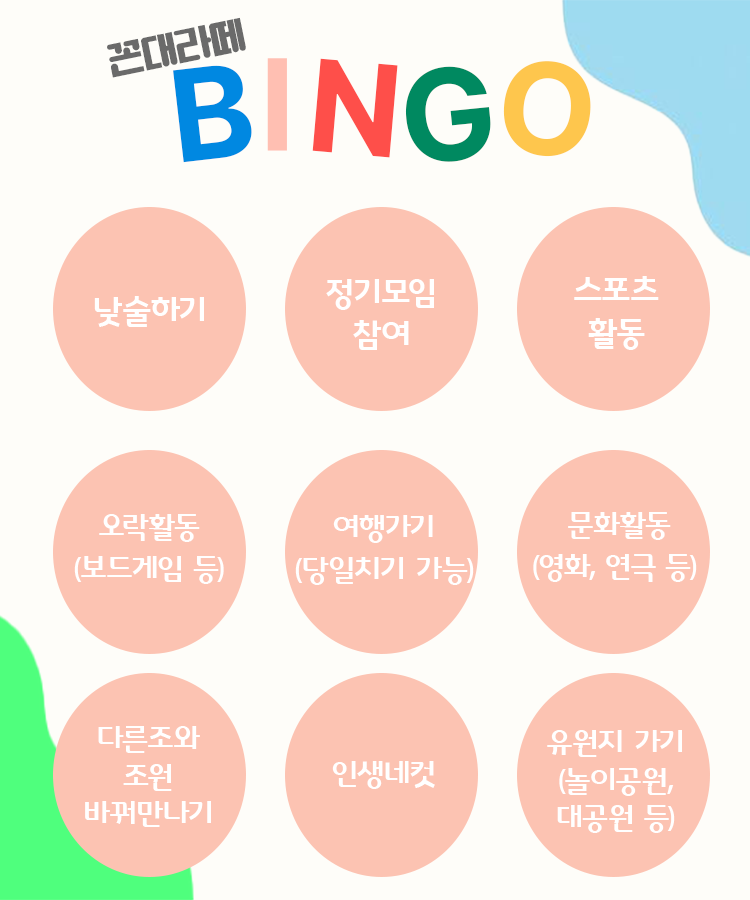
<style>
.page{position:relative;width:750px;height:900px;background:#fefdf9}
.page>*{position:absolute;margin:0}
.t1{font:32.9px "HSDuggobi";letter-spacing:-0.025em;color:#6a6a6a}
.t2{font:130.5px "Pretendard-Bold";letter-spacing:-0.025em;color:#0088e1}
.t3{font:130.5px "Pretendard-Bold";letter-spacing:-0.025em;color:#ffbfb2}
.t4{font:130.5px "Pretendard-Bold";letter-spacing:-0.025em;color:#fe4f4a}
.t5{font:130.5px "Pretendard-Bold";letter-spacing:-0.025em;color:#fec64d}
.t6{font:130.5px "Pretendard-Bold";letter-spacing:-0.025em;color:#008960}
.t7{font:33.3px/41.7px "1973MimiWorldB";letter-spacing:-0.025em;color:#ffffff}
.t8{font:33.3px "1973MimiWorldB";letter-spacing:-0.025em;color:#ffffff}
.t9{font:30.1px/41.7px "1973MimiWorldB";letter-spacing:-0.025em;color:#ffffff}
.t10{font:30.1px/37.5px "1973MimiWorldB";letter-spacing:-0.025em;color:#ffffff}
.t11{font:30.1px "1973MimiWorldB";letter-spacing:-0.025em;color:#ffffff}
</style>
<div class="page">
<p class="t1" style="left:107px;top:17px;width:139px;height:61px;rotate:-12deg">꼰대라떼</p>
<p class="t2" style="left:173px;top:65px;width:79px;height:98px;rotate:-7deg">B</p>
<p class="t3" style="left:267px;top:58px;width:20px;height:93px">I</p>
<p class="t4" style="left:312px;top:58px;width:86px;height:100px;rotate:5deg">N</p>
<p class="t5" style="left:503px;top:61px;width:88px;height:96px;rotate:5deg">O</p>
<p class="t6" style="left:405px;top:66px;width:86px;height:96px;rotate:-6deg">G</p>
<p class="t7" style="left:326px;top:279px;width:108px;height:71px;text-align:center">정기모임<br>참여</p>
<p class="t7" style="left:574px;top:276px;width:85px;height:74px;text-align:center">스포츠<br>활동</p>
<p class="t8" style="left:94px;top:296px;width:110px;height:31px">낮술하기</p>
<p class="t9" style="left:74px;top:514px;width:150px;height:70px;text-align:center">오락활동<br>(보드게임 등)</p>
<p class="t9" style="left:295px;top:515px;width:179px;height:70px;text-align:center">여행가기<br>(당일치기 가능)</p>
<p class="t9" style="left:533px;top:512px;width:164px;height:70px;text-align:center">문화활동<br>(영화, 연극 등)</p>
<p class="t10" style="left:85px;top:726px;width:126px;height:101px;text-align:center">다른조와<br>조원<br>바꿔만나기</p>
<p class="t10" style="left:547px;top:730px;width:135px;height:103px;text-align:center">유원지 가기<br>(놀이공원,<br>대공원 등)</p>
<p class="t11" style="left:332px;top:761px;width:103px;height:28px">인생네컷</p>
</div>
